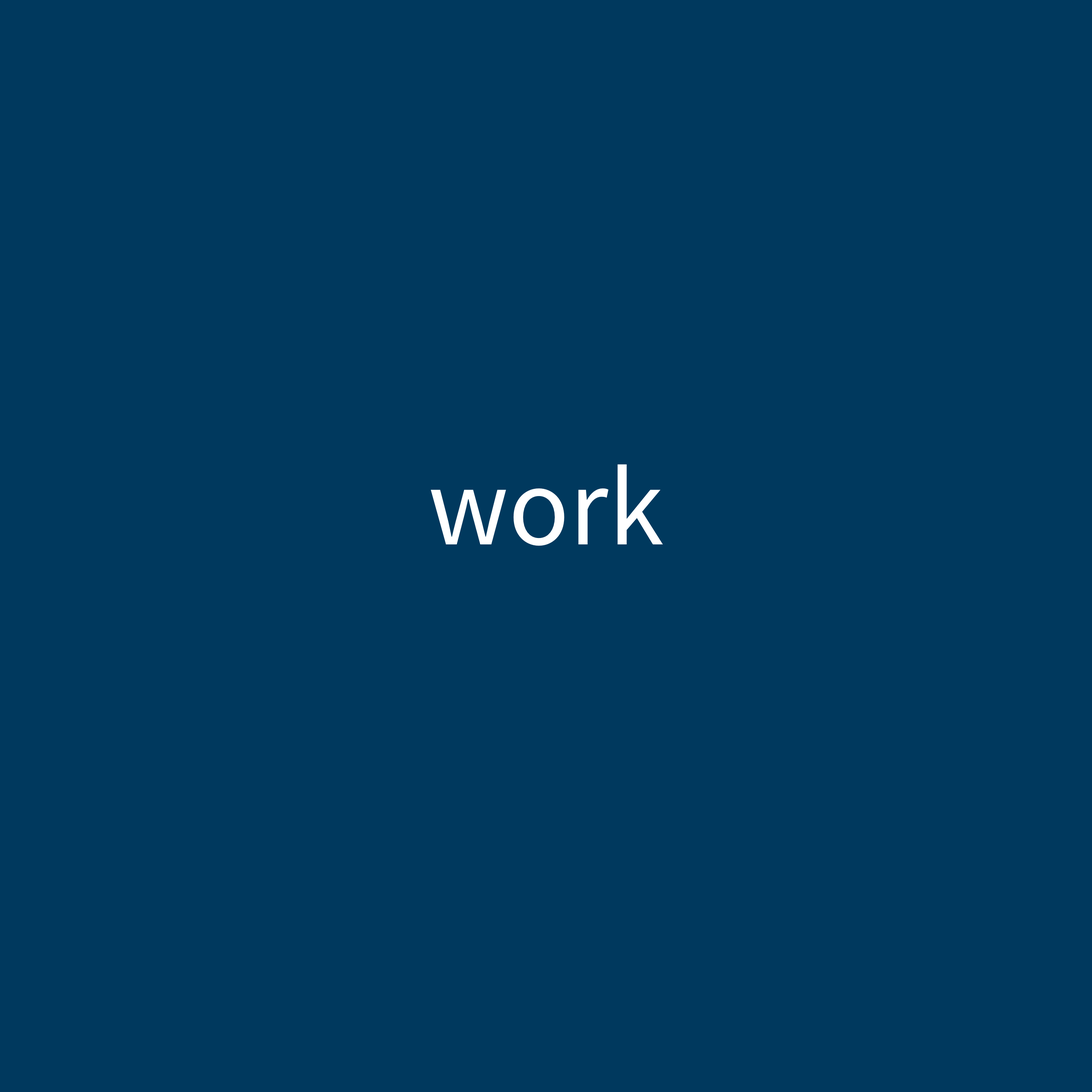
<style>
.page{position:relative;width:1092px;height:1092px;background:#00395e}
.page>*{position:absolute;margin:0}
.t1{font:100.5px "NotoSansCJKkr-Regular";color:#ffffff}
</style>
<div class="page">
<p class="t1" style="left:430px;top:464px;width:233px;height:82px">work</p>
</div>
